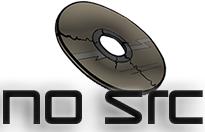
<style>
.page{position:relative;width:205px;height:132px;background:#ffffff}
.page>*{position:absolute;margin:0}
.t1{font:72px "SmashHit";color:#000000}
</style>
<div class="page">
<p class="t1" style="left:3px;top:90px;width:200px;height:34px">no src</p>
</div>
